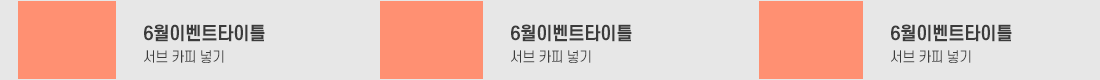
<style>
.page{position:relative;width:1100px;height:80px;background:#e7e7e7}
.page>*{position:absolute;margin:0}
.t1{font:18px "S-CoreDream-6Bold";letter-spacing:-0.025em;color:#3b3b3b;scale:0.95 1}
.t2{font:14px "S-CoreDream-4Regular";letter-spacing:-0.025em;color:#3b3b3b;scale:0.95 1}
</style>
<div class="page">
<p class="t1" style="left:144px;top:24px;width:121px;height:18px">6월이벤트타이틀</p>
<p class="t1" style="left:511px;top:24px;width:121px;height:18px">6월이벤트타이틀</p>
<p class="t1" style="left:891px;top:24px;width:121px;height:18px">6월이벤트타이틀</p>
<p class="t2" style="left:144px;top:50px;width:80px;height:13px">서브 카피 넣기</p>
<p class="t2" style="left:511px;top:50px;width:80px;height:13px">서브 카피 넣기</p>
<p class="t2" style="left:891px;top:50px;width:80px;height:13px">서브 카피 넣기</p>
</div>
